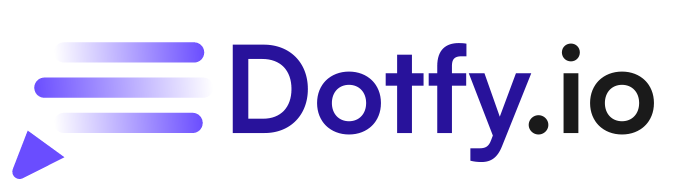
<style>
.page{position:relative;width:683px;height:183px;background:#ffffff}
.page>*{position:absolute;margin:0}
.t1{font:120.8px "Satoshi-Bold";color:#28129b}
.t2{font:120.8px "Satoshi-Bold";color:#1a1a1a}
</style>
<div class="page">
<p class="t1" style="left:232px;top:43px;width:422px;height:120px">Dotfy<span class="t2">.io</span></p>
</div>
